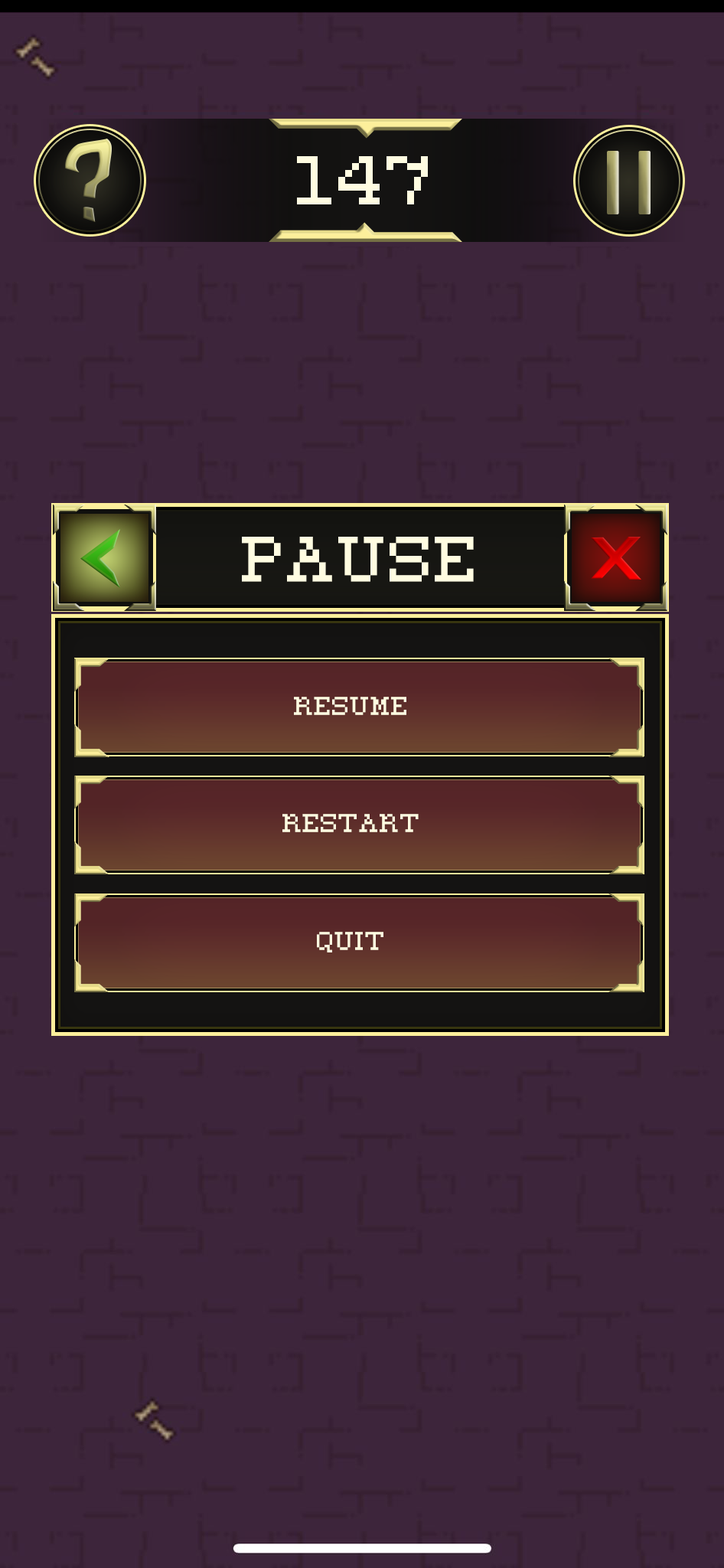
<style>
.page{position:relative;width:724px;height:1568px;background:#3d253b}
.page>*{position:absolute;margin:0}
.t1{font:55.1px "MyDearestBit";color:#fffce1;text-transform:uppercase}
.t2{font:51.4px "MyDearestBit";color:#fffce1;text-transform:uppercase}
.t3{font:20.5px "MyDearestBit";color:#fffce1;text-transform:uppercase}
</style>
<div class="page">
<p class="t1" style="left:297px;top:156px;width:131px;height:48px">147</p>
<p class="t2" style="left:242px;top:537px;width:232px;height:45px">Pause</p>
<p class="t3" style="left:294px;top:697px;width:113px;height:18px">Resume</p>
<p class="t3" style="left:283px;top:814px;width:136px;height:18px">Restart</p>
<p class="t3" style="left:317px;top:932px;width:67px;height:20px">Quit</p>
</div>
